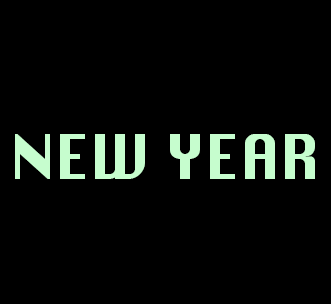
<style>
.page{position:relative;width:331px;height:304px;background:#000000}
.page>*{position:absolute;margin:0}
.t1{font:60px "Silom";color:#c6fdce}
</style>
<div class="page">
<p class="t1" style="left:15px;top:134px;width:300px;height:45px">NEW YEAR</p>
</div>
